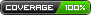
<style>
.page{position:relative;width:91px;height:15px}
.page>*{position:absolute;margin:0}
.t1{font:10.4px "VisitorTT1BRK";letter-spacing:-0.02em;color:#ffffff}
</style>
<div class="page">
<p class="t1" style="left:6px;top:5px;width:47px;height:5px">COVERAGE</p>
<p class="t1" style="left:65px;top:5px;width:20px;height:5px">100%</p>
</div>
